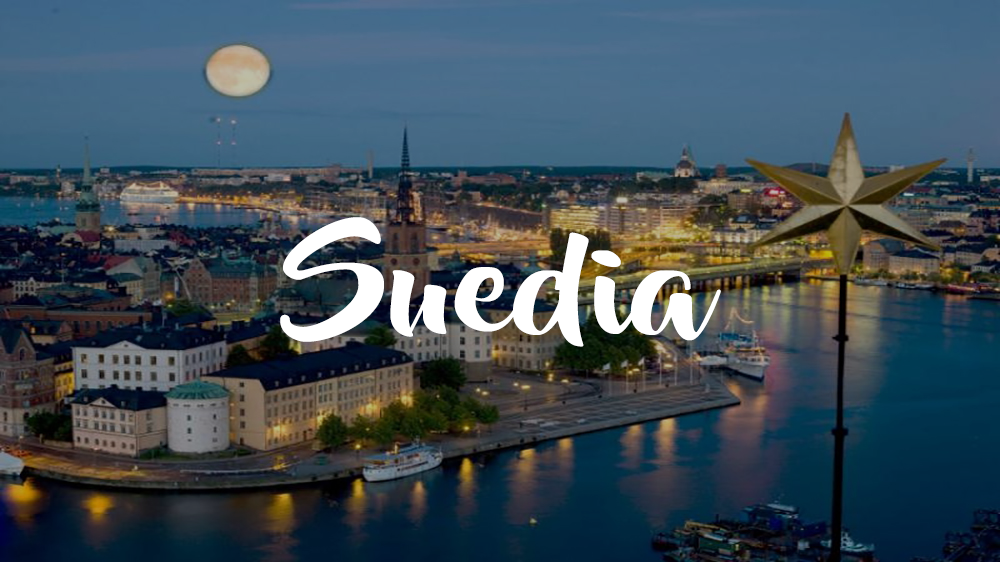
<style>
.page{position:relative;width:1000px;height:562px}
.page>*{position:absolute;margin:0}
.t1{font:120px "BeyondTheMountains";letter-spacing:0.01em;color:#ffffff;scale:1.25 1}
</style>
<div class="page">
<p class="t1" style="left:280px;top:217px;width:441px;height:130px">Suedia</p>
</div>
